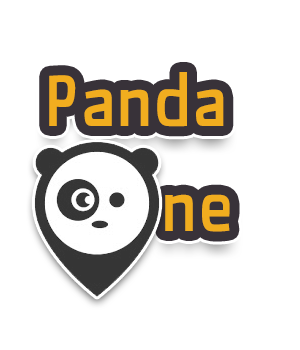
<style>
.page{position:relative;width:300px;height:350px;background:#ffffff}
.page>*{position:absolute;margin:0}
.t1{font:72px "MaterialSans-Medium";letter-spacing:0.025em;color:#f1ad1f}
</style>
<div class="page">
<p class="t1" style="left:49px;top:72px;width:175px;height:55px">Panda</p>
<p class="t1" style="left:49px;top:72px;width:175px;height:55px">Panda</p>
<p class="t1" style="left:165px;top:194px;width:65px;height:38px">ne</p>
<p class="t1" style="left:165px;top:194px;width:65px;height:38px">ne</p>
</div>
